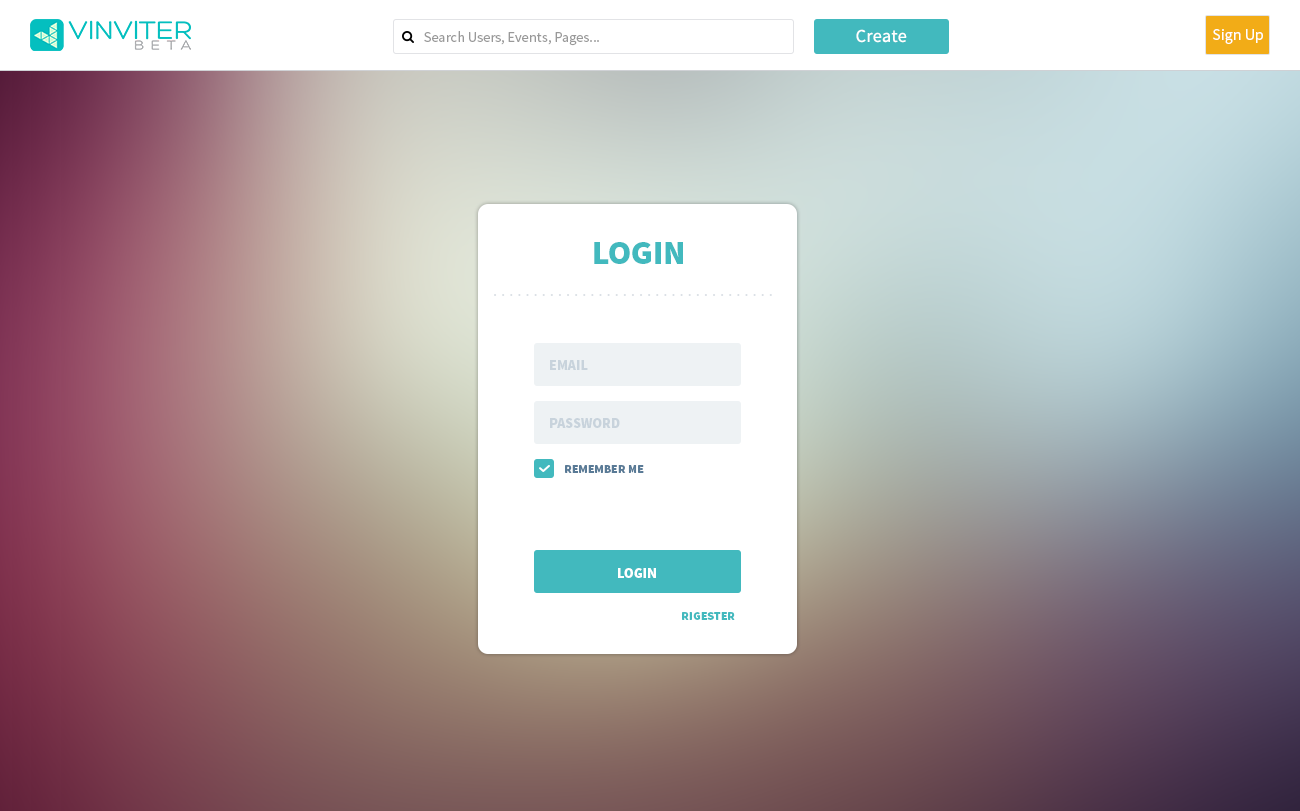
<style>
.page{position:relative;width:1300px;height:811px}
.page>*{position:absolute;margin:0}
.t1{font:18px "SourceSansPro-Regular";letter-spacing:0.02em;color:#ffffff}
.t2{font:16px "SourceSansPro-Regular";color:#ffffff}
.t3{font:14.3px "SourceSansPro-Regular";color:#999999}
.t4{font:33.5px "SourceSansPro-Black";color:#42b9be;text-transform:uppercase}
.t5{font:14px "SourceSansPro-Black";color:#c8d3dc;text-transform:uppercase}
.t6{font:12px "SourceSansPro-Black";color:#597a96;text-transform:uppercase}
.t7{font:14px "SourceSansPro-Black";color:#ffffff;text-transform:uppercase}
.t8{font:12px "SourceSansPro-Black";color:#42b9be;text-transform:uppercase}
</style>
<div class="page">
<p class="t1" style="left:856px;top:29px;width:51px;height:14px">Create</p>
<p class="t2" style="left:1213px;top:29px;width:50px;height:15px">Sign Up</p>
<p class="t3" style="left:424px;top:31px;width:175px;height:15px">Search Users, Events, Pages...</p>
<p class="t4" style="left:594px;top:242px;width:89px;height:22px">login</p>
<p class="t5" style="left:550px;top:360px;width:38px;height:10px">Email</p>
<p class="t5" style="left:550px;top:418px;width:70px;height:10px">PASSWORD</p>
<p class="t6" style="left:565px;top:465px;width:79px;height:8px">Remember me</p>
<p class="t7" style="left:618px;top:568px;width:38px;height:10px">Login</p>
<p class="t8" style="left:682px;top:612px;width:53px;height:8px">rigester</p>
</div>
